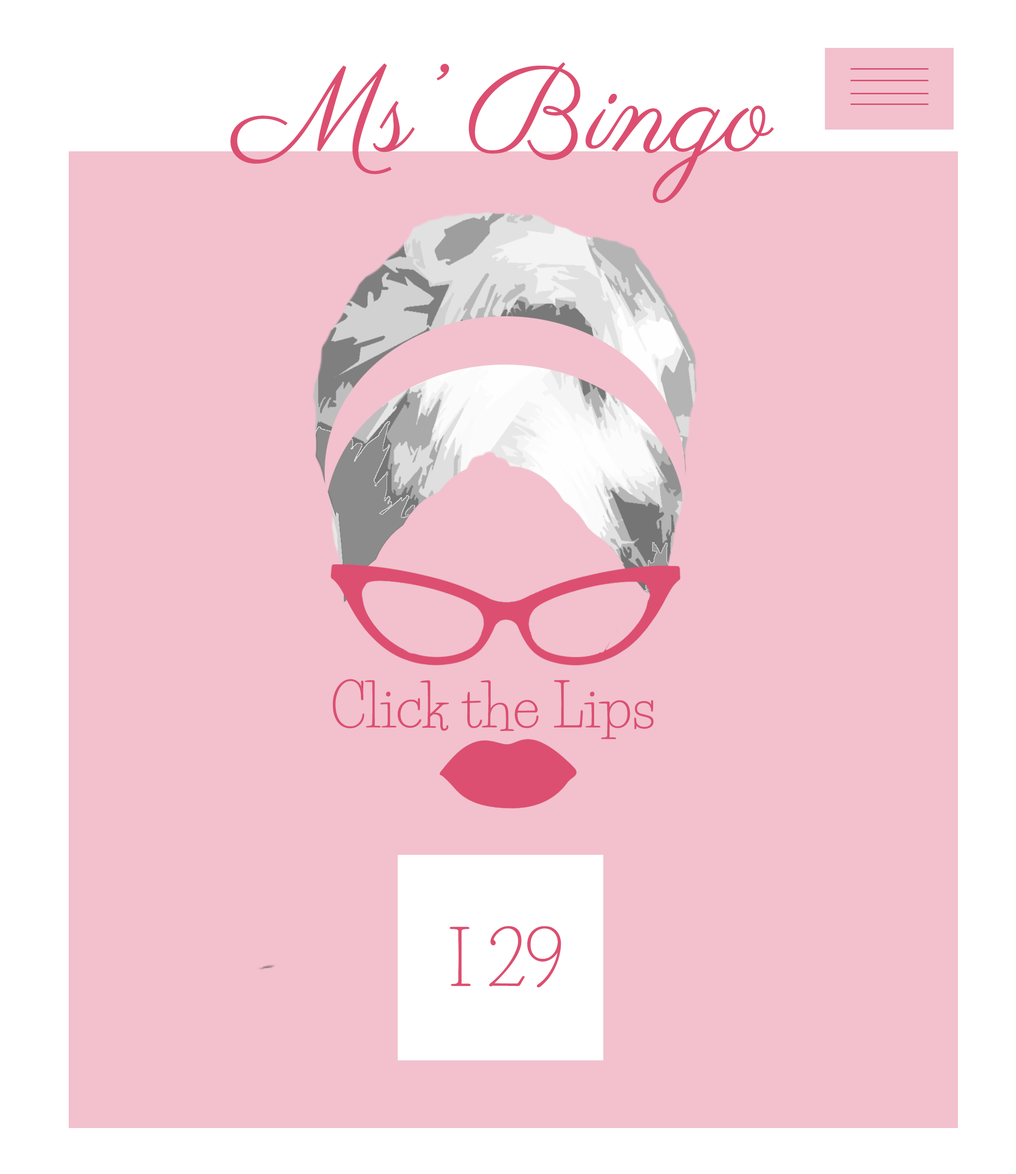
<style>
.page{position:relative;width:1016px;height:1174px;background:#f2c1cd}
.page>*{position:absolute;margin:0}
.t1{font:120.9px "Parisienne-Regular";color:#dc4f71}
.t2{font:57.6px "LifeSavers-Regular";color:#dc4f71}
.t3{font:71.9px "LifeSavers-Regular";color:#dc4f71}
</style>
<div class="page">
<p class="t1" style="left:230px;top:62px;width:544px;height:141px">Ms’ Bingo</p>
<p class="t2" style="left:332px;top:679px;width:321px;height:60px">Click the Lips</p>
<p class="t3" style="left:449px;top:926px;width:112px;height:62px">I 29</p>
</div>
